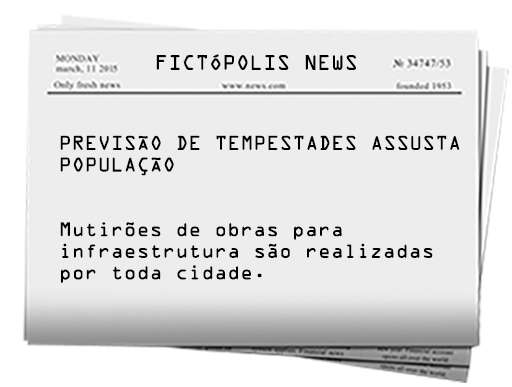
<style>
.page{position:relative;width:512px;height:387px;background:#ededed}
.page>*{position:absolute;margin:0}
.t1{font:18.8px "OCRAStd";color:#000000}
.t2{font:18px "OCRAStd";color:#000000}
</style>
<div class="page">
<p class="t1" style="left:156px;top:54px;width:200px;height:16px">FICTÓPOLIS NEWS</p>
<p class="t2" style="left:60px;top:135px;width:400px;height:149px">PREVISÃO DE TEMPESTADES ASSUSTA <br>POPULAÇÃO<br><br><br>Mutirões de obras para <br>infraestrutura são realizadas <br>por toda cidade.</p>
</div>
